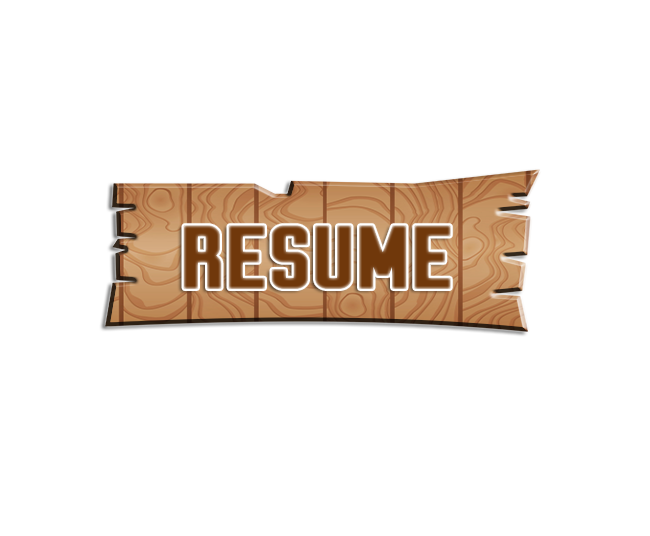
<style>
.page{position:relative;width:650px;height:536px;background:#ffffff}
.page>*{position:absolute;margin:0}
.t1{font:70px "BrewmasterGothicRound";color:#70380b;scale:1.26 1}
</style>
<div class="page">
<p class="t1" style="left:183px;top:225px;width:268px;height:64px">resume</p>
</div>
